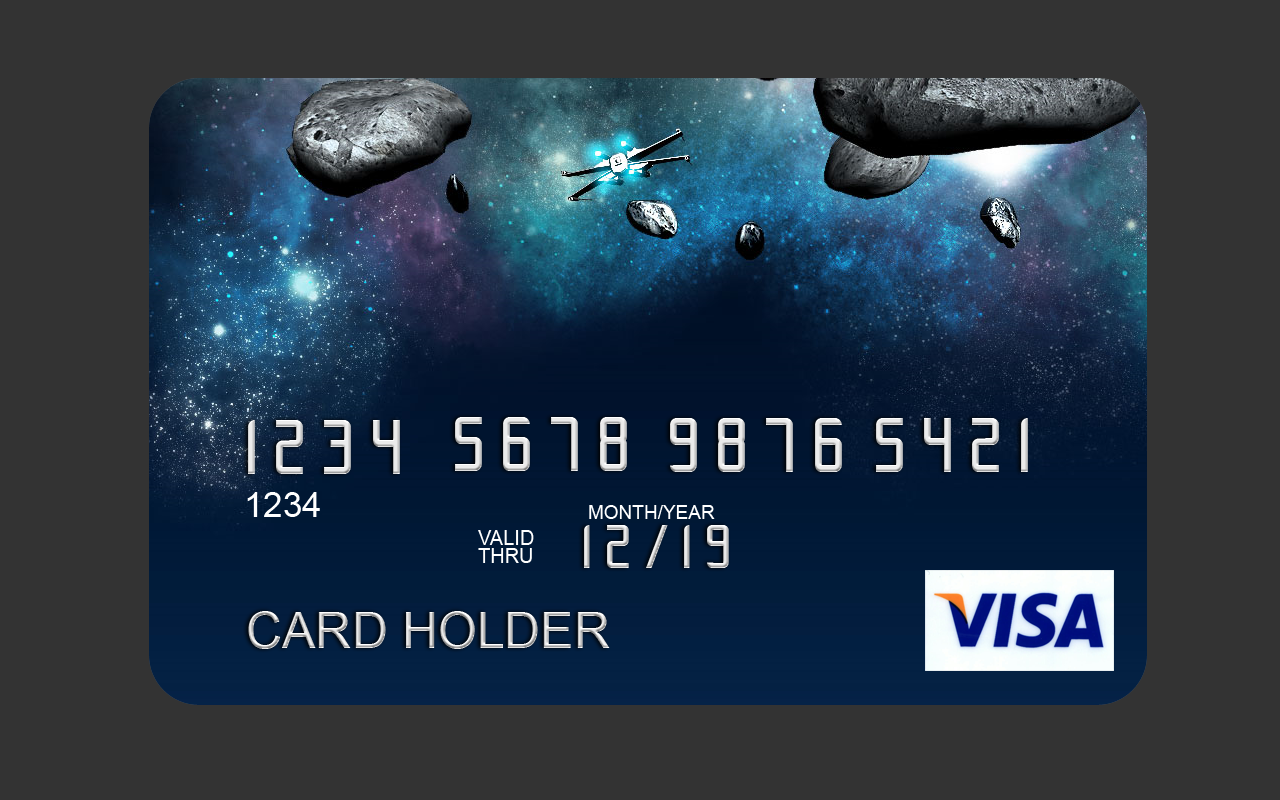
<style>
.page{position:relative;width:1280px;height:800px;background:#333333}
.page>*{position:absolute;margin:0}
.t1{font:67px "Slidfis";letter-spacing:0.22em}
.t2{font:35px "ArialMT";color:#ffffff}
.t3{font:19px "ArialMT";color:#ffffff}
.t4{font:20px/18px "ArialMT";color:#ffffff}
.t5{font:54px "Slidfis";letter-spacing:0.22em}
.t6{font:50px "ArialMT"}
</style>
<div class="page">
<p class="t1" style="left:248px;top:420px;width:152px;height:54px">1234</p>
<p class="t1" style="left:455px;top:417px;width:172px;height:54px">5678</p>
<p class="t1" style="left:670px;top:418px;width:172px;height:54px">9876</p>
<p class="t1" style="left:876px;top:418px;width:152px;height:54px">5421</p>
<p class="t2" style="left:247px;top:492px;width:73px;height:25px">1234</p>
<p class="t3" style="left:589px;top:505px;width:126px;height:14px">MONTH/YEAR</p>
<p class="t4" style="left:478px;top:530px;width:56px;height:33px">VALID<br>THRU</p>
<p class="t5" style="left:584px;top:525px;width:145px;height:43px">12/19</p>
<p class="t6" style="left:248px;top:611px;width:362px;height:38px">CARD HOLDER</p>
</div>
